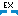
<style>
.page{position:relative;width:18px;height:16px;background:#ffffff}
.page>*{position:absolute;margin:0}
.t1{font:8px "Supertext";color:#000000}
</style>
<div class="page">
<p class="t1" style="left:4px;top:2px;width:9px;height:6px">EX</p>
</div>
